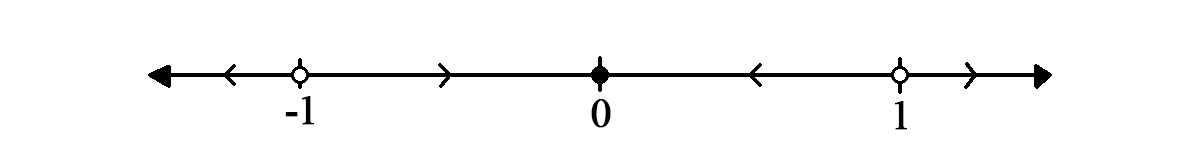
<style>
.page{position:relative;width:1200px;height:150px;background:#ffffff}
.page>*{position:absolute;margin:0}
.t1{font:41.7px "TimesNewRomanPSMT";letter-spacing:-0.05em;color:#000000;font-weight:bold}
</style>
<div class="page">
<p class="t1" style="left:285px;top:96px;width:29px;height:29px">-1</p>
<p class="t1" style="left:591px;top:99px;width:20px;height:29px">0</p>
<p class="t1" style="left:895px;top:101px;width:12px;height:29px">1</p>
</div>
